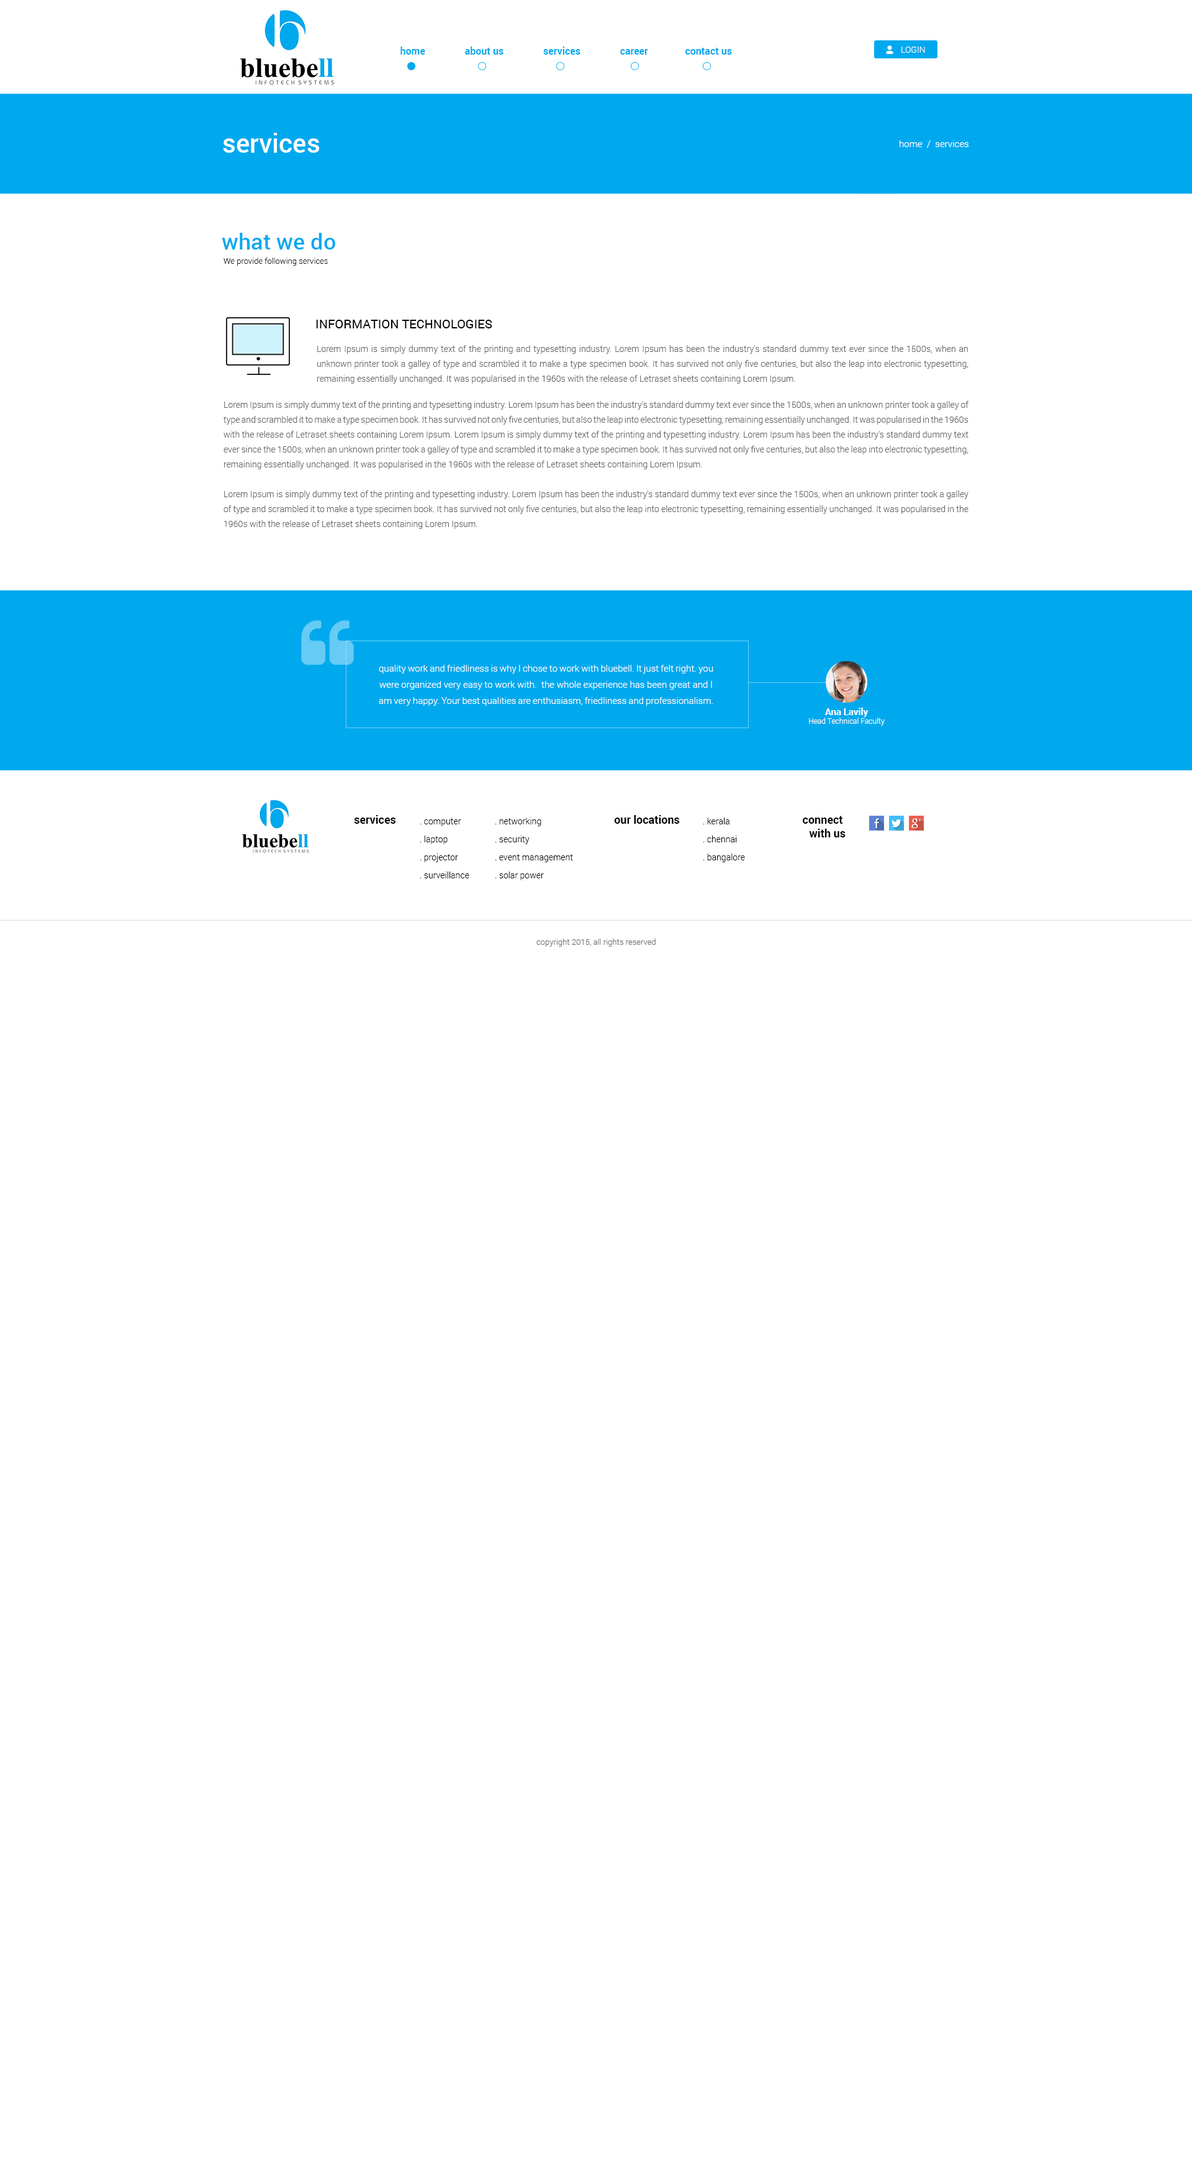
<style>
.page{position:relative;width:1192px;height:2159px;background:#ffffff}
.page>*{position:absolute;margin:0}
.t1{font:9.9px "Roboto-Bold";color:#00a9ee}
.t2{font:8.7px "Roboto-Light";color:#ffffff}
.t3{font:26.1px "Roboto-Medium";color:#ffffff}
.t4{font:9.3px "Roboto-Light";color:#ffffff}
.t5{font:22.3px "Roboto-Medium";color:#00a9ee}
.t6{font:8.1px "Roboto-Light";color:#000000}
.t7{font:12.4px "Roboto-Regular";color:#000000;text-transform:uppercase}
.t8{font:8.7px/14.9px "Roboto-Light";color:#646363}
.t9{font:9.3px/16.1px "Roboto-Light";color:#ffffff}
.t10{font:7.4px/10.6px "Roboto-Light";color:#ffffff}
.t11{font:9.3px/10.6px "Roboto-Bold";color:#ffffff}
.t12{font:11.2px "Roboto-Bold";color:#000000}
.t13{font:8.7px/18px "Roboto-Light";color:#000000}
.t14{font:11.2px/13.7px "Roboto-Bold";color:#000000}
.t15{font:8.1px "Roboto-Light";color:#6c6c6c}
</style>
<div class="page">
<p class="t1" style="left:400px;top:47px;width:332px;height:8px">home                about us                services                career               contact us</p>
<p class="t2" style="left:901px;top:47px;width:24px;height:6px">LOGIN</p>
<p class="t3" style="left:223px;top:133px;width:96px;height:20px">services</p>
<p class="t4" style="left:899px;top:140px;width:69px;height:8px">home  /  services</p>
<p class="t5" style="left:222px;top:233px;width:113px;height:17px">what we do</p>
<p class="t6" style="left:223px;top:258px;width:105px;height:8px">We provide following services</p>
<p class="t7" style="left:316px;top:320px;width:176px;height:8px">Information Technologies</p>
<p class="t8" style="left:317px;top:345px;width:651px;height:39px;text-align:justify">Lorem Ipsum is simply dummy text of the printing and typesetting industry. Lorem Ipsum has been the industry's standard dummy text ever since the 1500s, when an unknown printer took a galley of type and scrambled it to make a type specimen book. It has survived not only five centuries, but also the leap into electronic typesetting, remaining essentially unchanged. It was popularised in the 1960s with the release of Letraset sheets containing Lorem Ipsum.</p>
<p class="t8" style="left:223px;top:401px;width:746px;height:128px;text-align:justify">Lorem Ipsum is simply dummy text of the printing and typesetting industry. Lorem Ipsum has been the industry's standard dummy text ever since the 1500s, when an unknown printer took a galley of type and scrambled it to make a type specimen book. It has survived not only five centuries, but also the leap into electronic typesetting, remaining essentially unchanged. It was popularised in the 1960s with the release of Letraset sheets containing Lorem Ipsum. Lorem Ipsum is simply dummy text of the printing and typesetting industry. Lorem Ipsum has been the industry's standard dummy text ever since the 1500s, when an unknown printer took a galley of type and scrambled it to make a type specimen book. It has survived not only five centuries, but also the leap into electronic typesetting, remaining essentially unchanged. It was popularised in the 1960s with the release of Letraset sheets containing Lorem Ipsum. <br><br>Lorem Ipsum is simply dummy text of the printing and typesetting industry. Lorem Ipsum has been the industry's standard dummy text ever since the 1500s, when an unknown printer took a galley of type and scrambled it to make a type specimen book. It has survived not only five centuries, but also the leap into electronic typesetting, remaining essentially unchanged. It was popularised in the 1960s with the release of Letraset sheets containing Lorem Ipsum.</p>
<p class="t9" style="left:379px;top:665px;width:334px;height:41px;text-align:center">quality work and friedliness is why I chose to work with bluebell. It just felt right. you were organized very easy to work with.  the whole experience has been great and I am very happy. Your best qualities are enthusiasm, friedliness and professionalism.</p>
<p class="t10" style="left:809px;top:708px;width:75px;height:18px;text-align:center"><span class="t11">Ana Lavily<br></span>Head Technical Faculty</p>
<p class="t12" style="left:354px;top:815px;width:42px;height:9px">services</p>
<p class="t13" style="left:420px;top:818px;width:49px;height:60px">. computer<br>. laptop<br>. projector<br>. surveillance</p>
<p class="t13" style="left:495px;top:817px;width:78px;height:63px">. networking<br>. security<br>. event management<br>. solar power</p>
<p class="t12" style="left:614px;top:815px;width:66px;height:9px">our locations</p>
<p class="t13" style="left:703px;top:817px;width:42px;height:45px">. kerala<br>. chennai<br>. bangalore</p>
<p class="t14" style="left:803px;top:816px;width:42px;height:21px;text-align:right">connect <br>with us</p>
<p class="t15" style="left:536px;top:938px;width:119px;height:9px">copyright 2015, all rights reserved</p>
</div>
